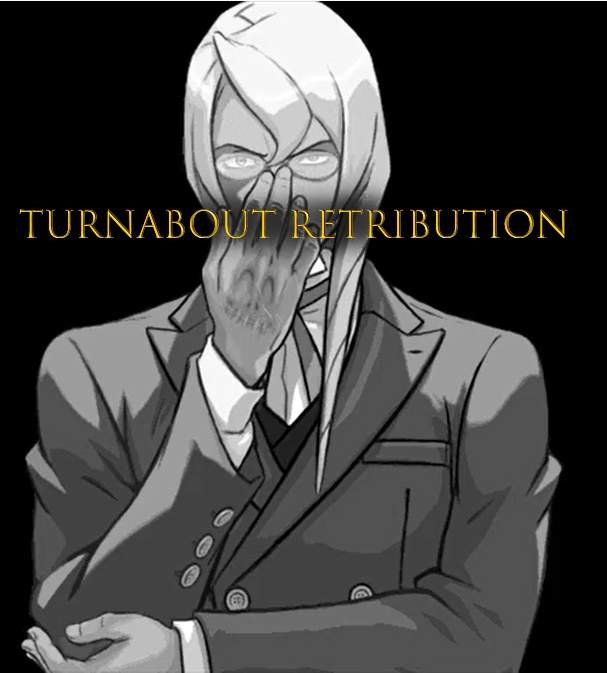
<style>
.page{position:relative;width:607px;height:673px;background:#000000}
.page>*{position:absolute;margin:0}
.t1{font:36.5px "TrajanColor-Concept"}
</style>
<div class="page">
<p class="t1" style="left:19px;top:209px;width:549px;height:30px">Turnabout Retribution</p>
</div>
